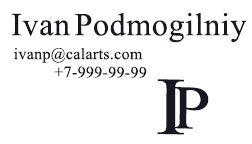
<style>
.page{position:relative;width:252px;height:144px;background:#ffffff}
.page>*{position:absolute;margin:0}
.t1{font:32px "TimesNewRomanPSMT";letter-spacing:0.02em;color:#181621}
.t2{font:16px "TimesNewRomanPSMT";letter-spacing:0.02em;color:#181621}
.t3{font:82.4px "TimesNewRomanPSMT";letter-spacing:0.02em;color:#181621;scale:1.12 1}
.t4{font:62px "TimesNewRomanPSMT";letter-spacing:0.02em;color:#181621;scale:1.12 1}
</style>
<div class="page">
<p class="t1" style="left:11px;top:13px;width:59px;height:23px">Ivan</p>
<p class="t1" style="left:75px;top:13px;width:172px;height:30px">Podmogilniy</p>
<p class="t2" style="left:14px;top:48px;width:129px;height:15px">ivanp@calarts.com</p>
<p class="t2" style="left:54px;top:66px;width:93px;height:12px">+7-999-99-99</p>
<p class="t3" style="left:157px;top:79px;width:27px;height:56px;rotate:1deg">I</p>
<p class="t4" style="left:173px;top:87px;width:36px;height:42px;rotate:1deg">P</p>
</div>
